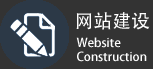
<style>
.page{position:relative;width:153px;height:69px;background:#333333}
.page>*{position:absolute;margin:0}
.t1{font:18.9px "AdobeHeitiStd-Regular";color:#fefefe}
.t2{font:12px/14px "AdobeHeitiStd-Regular";color:#fefefe}
</style>
<div class="page">
<p class="t1" style="left:76px;top:12px;width:74px;height:18px">网站建设</p>
<p class="t2" style="left:76px;top:37px;width:71px;height:25px">Website Construction</p>
</div>
